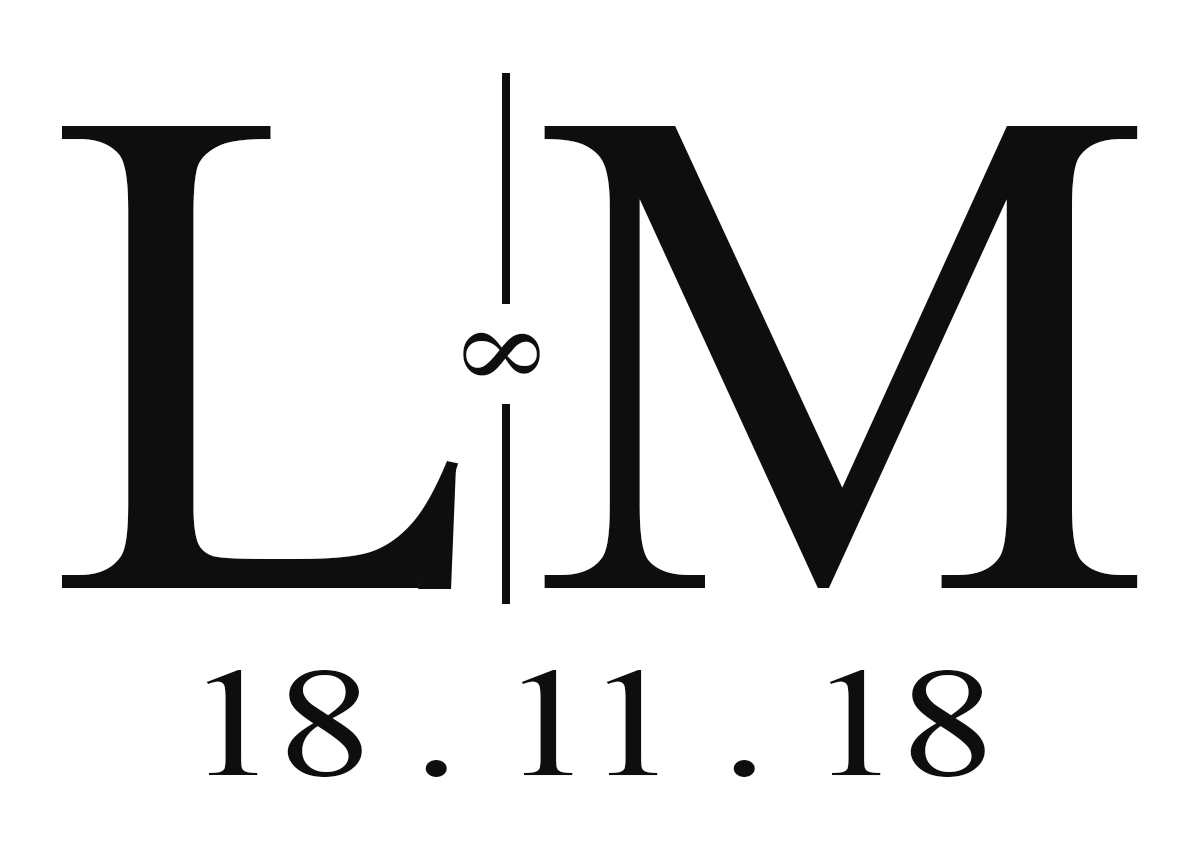
<style>
.page{position:relative;width:1200px;height:850px;background:#ffffff}
.page>*{position:absolute;margin:0}
.t1{font:695.7px "TimesNewRomanPSMT";letter-spacing:-0.025em;color:#0f0e0e}
.t2{font:111.3px "TimesNewRomanPSMT";letter-spacing:-0.025em;color:#0f0e0e}
.t3{font:154.8px "TimesNewRomanPSMT";letter-spacing:-0.025em;color:#0f0e0e;scale:1.25 1}
</style>
<div class="page">
<p class="t1" style="left:61px;top:126px;width:398px;height:462px">L</p>
<p class="t1" style="left:544px;top:126px;width:594px;height:462px">M</p>
<p class="t2" style="left:463px;top:332px;width:77px;height:44px;rotate:90deg">8</p>
<p class="t3" style="left:206px;top:670px;width:779px;height:107px">18 . 11 . 18</p>
</div>
